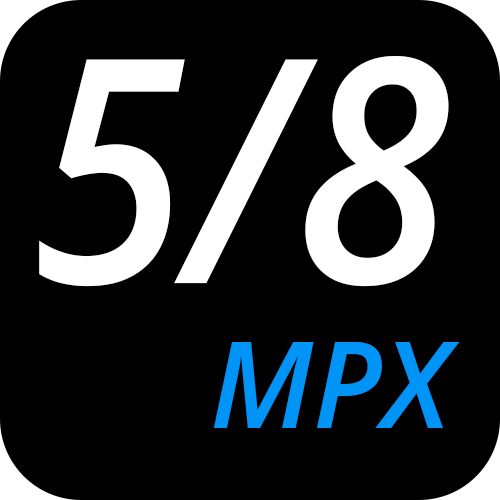
<style>
.page{position:relative;width:500px;height:500px;background:#000000}
.page>*{position:absolute;margin:0}
.t1{font:312.5px "OpenSans-SemiBoldItalic";color:#ffffff;scale:0.9 1}
.t2{font:120px "OpenSans-SemiBoldItalic";color:#0094f7}
</style>
<div class="page">
<p class="t1" style="left:39px;top:56px;width:410px;height:231px">5/8</p>
<p class="t2" style="left:213px;top:342px;width:247px;height:86px">MPX</p>
</div>
